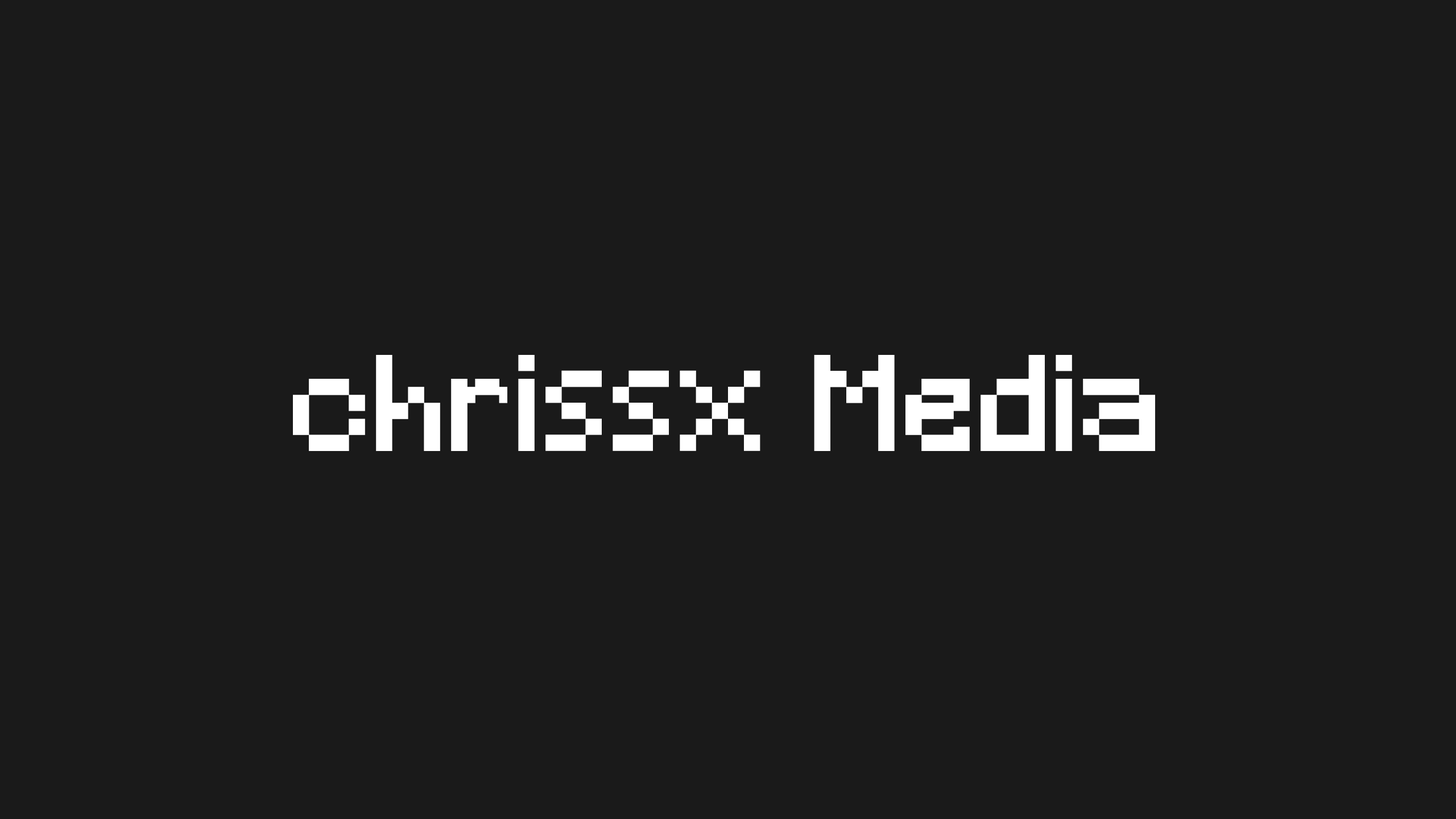
<style>
.page{position:relative;width:1456px;height:819px;background:#1a1a1a}
.page>*{position:absolute;margin:0}
.t1{font:128px "Minecraft";letter-spacing:0.025em;color:#ffffff}
.t2{font:120.1px "ArialMT";letter-spacing:0.025em;color:#ffffff}
</style>
<div class="page">
<p class="t1" style="left:293px;top:355px;width:862px;height:96px"><span class="t2"><br><br></span>chrissx Media</p>
</div>
